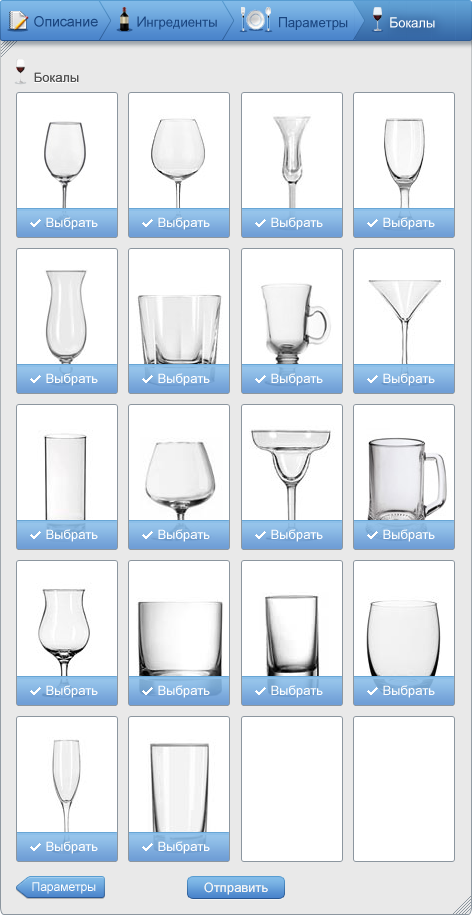
<style>
.page{position:relative;width:472px;height:915px;background:#ffffff}
.page>*{position:absolute;margin:0}
.t1{font:14px "ArialMT";color:#1b4680;font-weight:bold}
.t2{font:13px "ArialMT";color:#1b4680;font-weight:bold}
.t3{font:13px "ArialMT";color:#ffffff;font-weight:bold}
.t4{font:14px "ArialMT";color:#ffffff;font-weight:bold}
.t5{font:13px "ArialMT";color:#505050}
.t6{font:13px "ArialMT";color:#ffffff}
.t7{font:12px "ArialMT";color:#ffffff}
.t8{font:13px "ArialMT";color:#f5f5f5}
</style>
<div class="page">
<p class="t1" style="left:34px;top:16px;width:64px;height:11px">Описание</p>
<p class="t2" style="left:137px;top:16px;width:80px;height:14px"><span class="t1">И</span>нгредиенты</p>
<p class="t2" style="left:279px;top:17px;width:69px;height:13px"><span class="t1">П</span>араметры</p>
<p class="t3" style="left:390px;top:17px;width:45px;height:11px"><span class="t4">Б</span>окалы</p>
<p class="t5" style="left:34px;top:72px;width:45px;height:10px">Бокалы</p>
<p class="t6" style="left:46px;top:217px;width:52px;height:13px">Выбрать</p>
<p class="t6" style="left:158px;top:217px;width:52px;height:13px">Выбрать</p>
<p class="t6" style="left:271px;top:217px;width:52px;height:13px">Выбрать</p>
<p class="t6" style="left:383px;top:217px;width:52px;height:13px">Выбрать</p>
<p class="t6" style="left:46px;top:373px;width:52px;height:13px">Выбрать</p>
<p class="t6" style="left:158px;top:373px;width:52px;height:13px">Выбрать</p>
<p class="t6" style="left:271px;top:373px;width:52px;height:13px">Выбрать</p>
<p class="t6" style="left:383px;top:373px;width:52px;height:13px">Выбрать</p>
<p class="t6" style="left:46px;top:529px;width:52px;height:13px">Выбрать</p>
<p class="t6" style="left:158px;top:529px;width:52px;height:13px">Выбрать</p>
<p class="t6" style="left:271px;top:529px;width:52px;height:13px">Выбрать</p>
<p class="t6" style="left:383px;top:529px;width:52px;height:13px">Выбрать</p>
<p class="t6" style="left:46px;top:685px;width:52px;height:13px">Выбрать</p>
<p class="t6" style="left:158px;top:685px;width:52px;height:13px">Выбрать</p>
<p class="t6" style="left:271px;top:685px;width:52px;height:13px">Выбрать</p>
<p class="t6" style="left:383px;top:685px;width:52px;height:13px">Выбрать</p>
<p class="t6" style="left:46px;top:841px;width:52px;height:13px">Выбрать</p>
<p class="t6" style="left:158px;top:841px;width:52px;height:13px">Выбрать</p>
<p class="t7" style="left:32px;top:882px;width:64px;height:12px">Параметры</p>
<p class="t8" style="left:204px;top:882px;width:64px;height:13px">Отправить</p>
</div>
